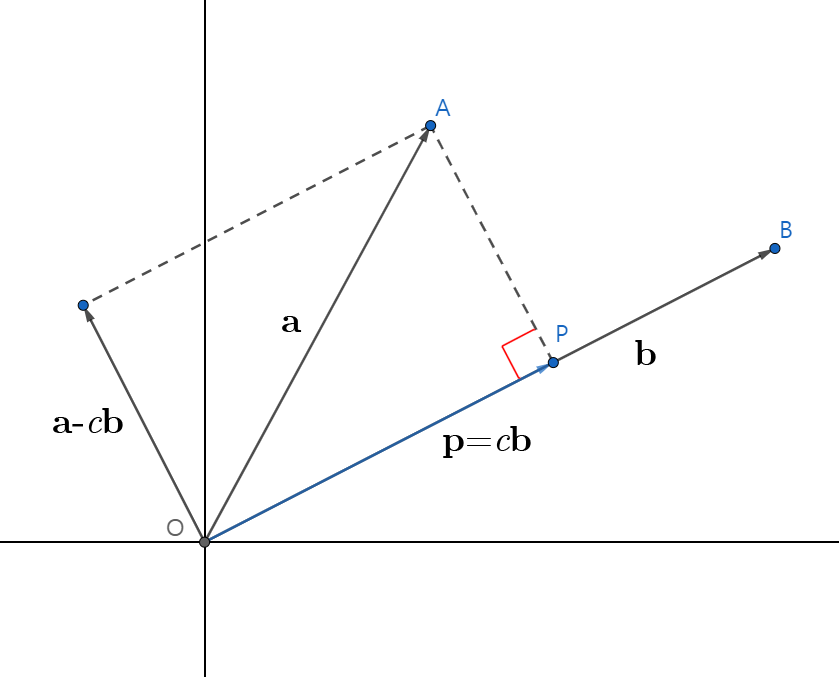
<style>
.page{position:relative;width:839px;height:677px;background:#ffffff}
.page>*{position:absolute;margin:0}
.t1{font:36px "CMUSerif-Bold";color:#000000}
.t2{font:36px "CMUSerif-Roman";color:#000000;font-weight:bold}
.t3{font:36px "CMUSerif-Italic";color:#000000}
.t4{font:36px "CMUSerif-Roman";color:#000000}
</style>
<div class="page">
<p class="t1" style="left:282px;top:316px;width:20px;height:16px">a</p>
<p class="t1" style="left:635px;top:340px;width:21px;height:25px">b</p>
<p class="t1" style="left:53px;top:408px;width:70px;height:25px">a<span class="t2">-</span><span class="t3">c</span>b</p>
<p class="t1" style="left:443px;top:426px;width:88px;height:32px">p<span class="t4">=</span><span class="t3">c</span>b</p>
</div>
